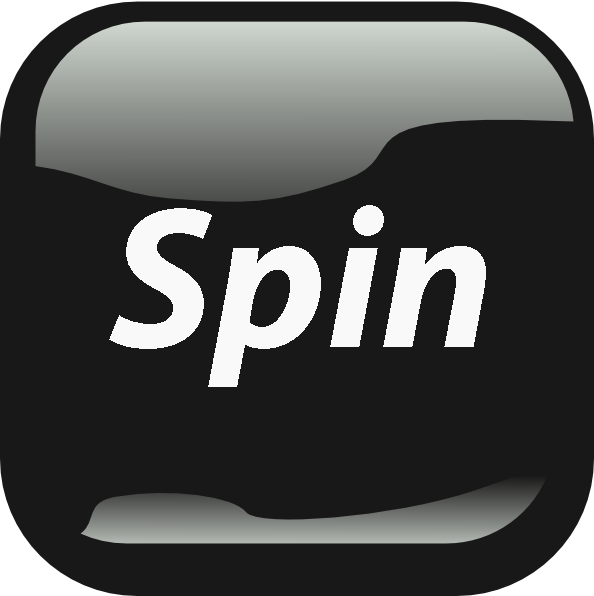
<style>
.page{position:relative;width:594px;height:596px;background:#191818}
.page>*{position:absolute;margin:0}
.t1{font:202.7px "MyriadPro-BoldIt";color:#f9f9f9}
</style>
<div class="page">
<p class="t1" style="left:109px;top:205px;width:377px;height:182px">Spin</p>
</div>
